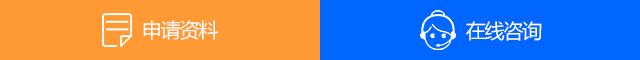
<style>
.page{position:relative;width:640px;height:60px;background:#ff9933}
.page>*{position:absolute;margin:0}
.t1{font:20px "MicrosoftYaHei";letter-spacing:-0.06em;color:#ffffff;text-transform:uppercase}
</style>
<div class="page">
<p class="t1" style="left:143px;top:20px;width:75px;height:20px">申请资料</p>
<p class="t1" style="left:466px;top:21px;width:76px;height:20px">在线咨询</p>
</div>
